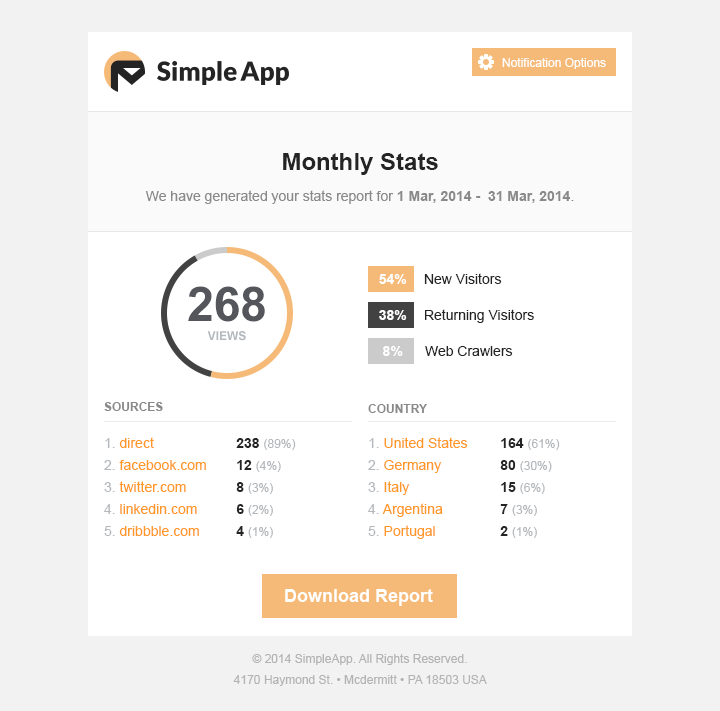
<style>
.page{position:relative;width:720px;height:711px;background:#ffffff}
.page>*{position:absolute;margin:0}
.t1{font:12px "ArialMT";color:#ffffff}
.t2{font:24px "Arial-BoldMT";color:#242424}
.t3{font:14px "ArialMT";color:#898989}
.t4{font:14px "Arial-BoldMT";color:#898989}
.t5{font:14px "Arial-BoldMT";color:#ffffff}
.t6{font:14px "ArialMT";color:#242424}
.t7{font:12px/19px "Arial-BoldMT";color:#b4b7bb;text-transform:uppercase}
.t8{font:48px/19px "Arial-BoldMT";color:#54565c}
.t9{font:12px "Arial-BoldMT";color:#898989;text-transform:uppercase}
.t10{font:14px/22px "ArialMT";color:#ff9826}
.t11{font:14px/22px "ArialMT";color:#b4b7bb}
.t12{font:12px/22px "ArialMT";color:#b4b7bb}
.t13{font:14px/22px "Arial-BoldMT";color:#242424}
.t14{font:18px "Arial-BoldMT";color:#ffffff}
.t15{font:12px/21px "ArialMT";color:#b3b3b3}
</style>
<div class="page">
<p class="t1" style="left:502px;top:58px;width:104px;height:11px">Notification Options</p>
<p class="t2" style="left:283px;top:153px;width:155px;height:22px">Monthly Stats</p>
<p class="t3" style="left:145px;top:190px;width:429px;height:14px">We have generated your stats report for <span class="t4">1 Mar, 2014 -  31 Mar, 2014</span>.</p>
<p class="t5" style="left:379px;top:274px;width:28px;height:10px">54%</p>
<p class="t6" style="left:424px;top:273px;width:78px;height:11px">New Visitors</p>
<p class="t7" style="left:188px;top:286px;width:77px;height:55px;text-align:center"><span class="t8">268<br></span>views</p>
<p class="t5" style="left:379px;top:310px;width:28px;height:10px">38%</p>
<p class="t6" style="left:425px;top:309px;width:109px;height:14px">Returning Visitors</p>
<p class="t5" style="left:383px;top:346px;width:20px;height:10px">8%</p>
<p class="t6" style="left:425px;top:346px;width:88px;height:10px">Web Crawlers</p>
<p class="t9" style="left:104px;top:402px;width:59px;height:9px">Sources</p>
<p class="t9" style="left:368px;top:404px;width:59px;height:9px">Country</p>
<p class="t10" style="left:104px;top:437px;width:102px;height:99px"><span class="t11">1. </span>direct<br><span class="t11">2. </span>facebook.com<br><span class="t11">3. </span>twitter.com<br><span class="t11">4. </span>linkedin.com<br><span class="t11">5. </span>dribbble.com</p>
<p class="t12" style="left:236px;top:438px;width:60px;height:100px"><span class="t13">238 </span>(89%)<br><span class="t13">12 </span>(4%)<br><span class="t13">8 </span>(3%)<br><span class="t13">6 </span>(2%)<br><span class="t13">4 </span>(1%)</p>
<p class="t10" style="left:368px;top:437px;width:100px;height:102px"><span class="t11">1. </span>United States<br><span class="t11">2. </span>Germany<br><span class="t11">3. </span>Italy<br><span class="t11">4. </span>Argentina<br><span class="t11">5. </span>Portugal</p>
<p class="t12" style="left:500px;top:438px;width:60px;height:100px"><span class="t13">164 </span>(61%)<br><span class="t13">80 </span>(30%)<br><span class="t13">15 </span>(6%)<br><span class="t13">7 </span>(3%)<br><span class="t13">2 </span>(1%)</p>
<p class="t14" style="left:285px;top:589px;width:148px;height:17px">Download Report</p>
<p class="t15" style="left:233px;top:654px;width:254px;height:32px;text-align:center">© 2014 SimpleApp. All Rights Reserved.<br>4170 Haymond St. • Mcdermitt • PA 18503 USA</p>
</div>
